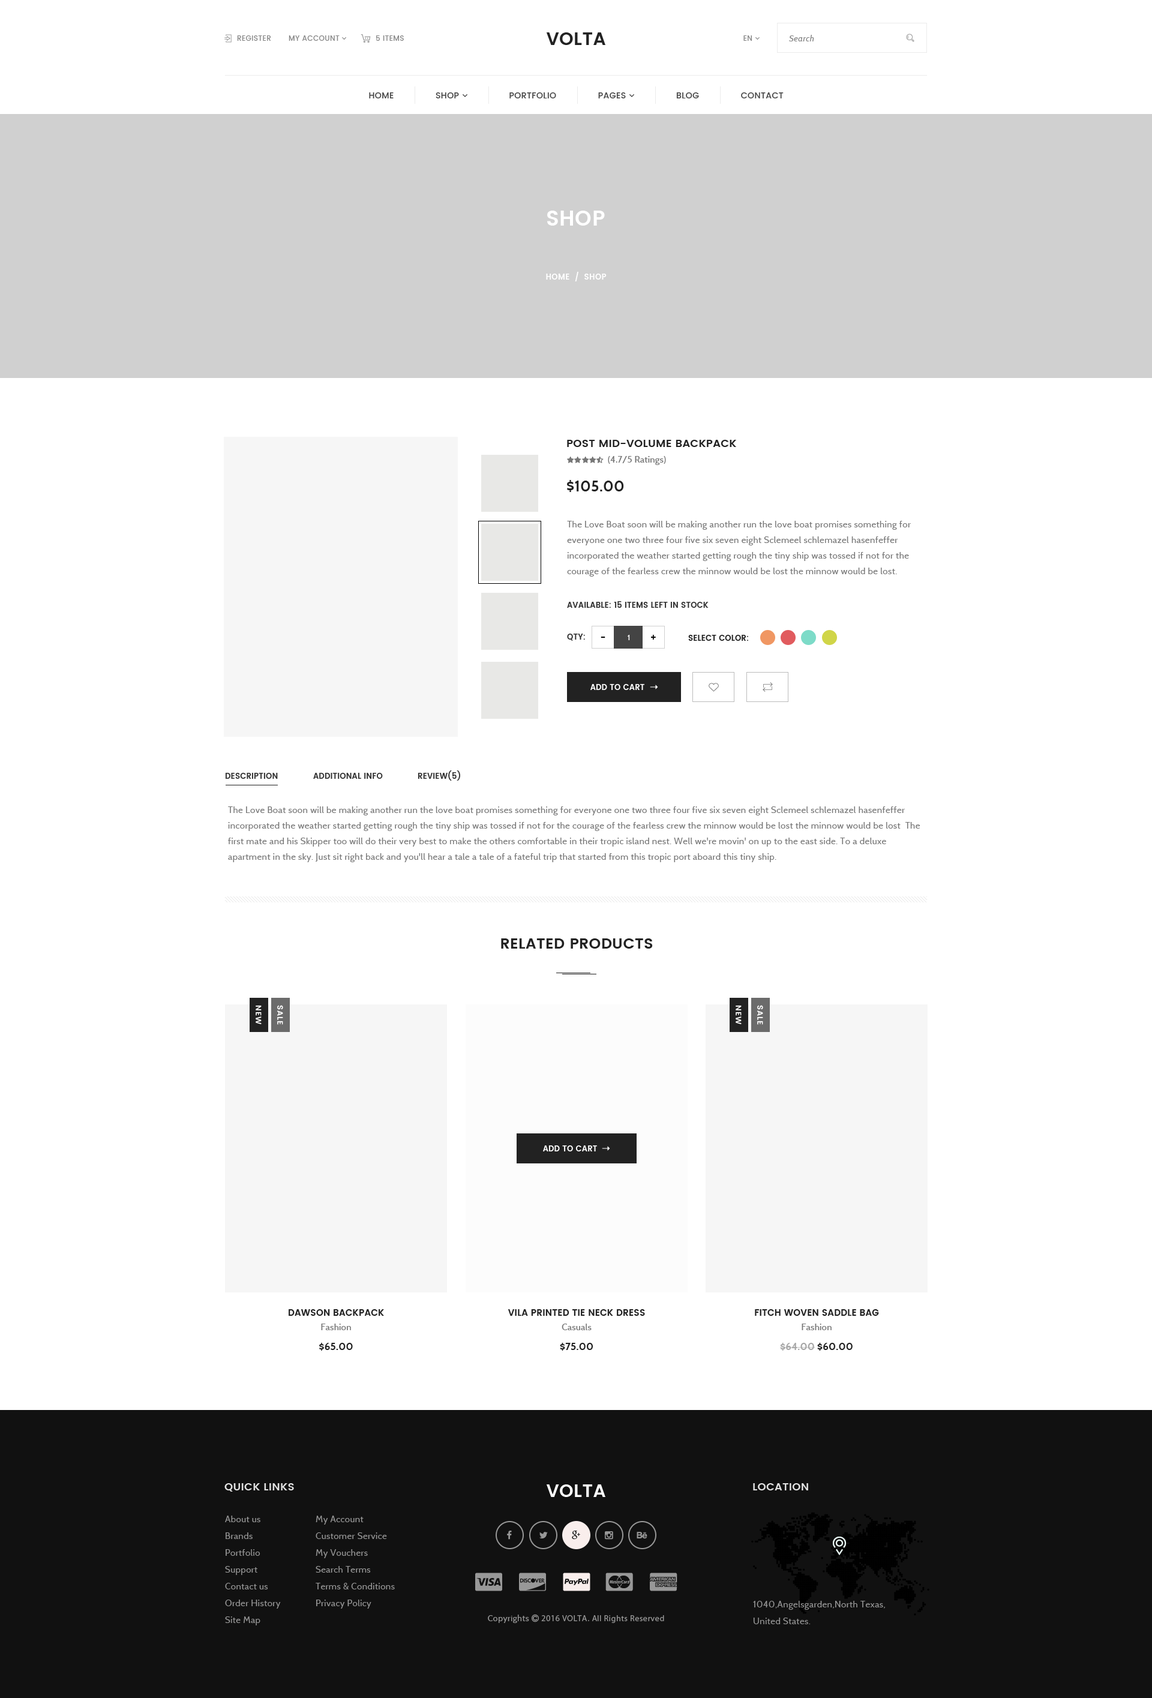
<style>
.page{position:relative;width:1152px;height:1698px;background:#ffffff}
.page>*{position:absolute;margin:0}
.t1{font:7.2px "Poppins-Medium";letter-spacing:0.03em;color:#888888}
.t2{font:18px "Poppins-SemiBold";letter-spacing:0.015em;color:#222222}
.t3{font:8.4px "Cabin-Italic";letter-spacing:0.04em;color:#888888}
.t4{font:21px "Poppins-SemiBold";letter-spacing:0.015em;color:#ffffff}
.t5{font:7.8px "Poppins-SemiBold";letter-spacing:0.03em;color:#ffffff}
.t6{font:10.8px "Poppins-SemiBold";letter-spacing:0.015em;color:#222222;text-transform:uppercase}
.t7{font:15px "Cabin-Bold";letter-spacing:0.015em;color:#222222}
.t8{font:9px/15.6px "Cabin-Regular";letter-spacing:0.03em;color:#777777}
.t9{font:7.8px "Poppins-SemiBold";letter-spacing:0.015em;color:#333333;text-transform:uppercase}
.t10{font:12px "Cabin-Regular";letter-spacing:0.015em;color:#000000}
.t11{font:7.8px "Cabin-Regular";letter-spacing:0.015em;color:#ffffff}
.t12{font:7.8px "Poppins-SemiBold";letter-spacing:0.015em;color:#222222}
.t13{font:7.8px "Poppins-SemiBold";letter-spacing:0.015em;color:#ffffff}
.t14{font:15px "Poppins-SemiBold";letter-spacing:0.015em;color:#222222;text-transform:uppercase}
.t15{font:7.8px "Poppins-SemiBold";letter-spacing:0.07em;color:#ffffff}
.t16{font:9px/14.4px "Poppins-SemiBold";letter-spacing:0.015em;color:#222222;text-transform:uppercase}
.t17{font:9px/14.4px "Cabin-Medium";letter-spacing:0.015em;color:#777777}
.t18{font:10.2px "Cabin-Bold";letter-spacing:0.015em;color:#222222}
.t19{font:10.2px "Cabin-Bold";letter-spacing:0.015em;color:#a7a7a7}
.t20{font:10.8px "Poppins-SemiBold";letter-spacing:0.015em;color:#e1e1e1}
.t21{font:18px "Poppins-SemiBold";letter-spacing:0.015em;color:#ffffff}
.t22{font:9px/16.8px "Cabin-Regular";letter-spacing:0.03em;color:#989898}
</style>
<div class="page">
<p class="t1" style="left:237px;top:35px;width:34px;height:6px">REGISTER</p>
<p class="t1" style="left:376px;top:35px;width:28px;height:6px">5 ITEMS</p>
<p class="t2" style="left:546px;top:32px;width:59px;height:13px">VOLTA</p>
<p class="t3" style="left:789px;top:35px;width:25px;height:6px">Search</p>
<p class="t4" style="left:547px;top:211px;width:58px;height:15px">SHOP</p>
<p class="t5" style="left:546px;top:272px;width:61px;height:9px">HOME  /  SHOP</p>
<p class="t6" style="left:567px;top:440px;width:169px;height:7px">Post Mid-Volume Backpack</p>
<p class="t7" style="left:567px;top:480px;width:57px;height:12px">$105.00</p>
<p class="t8" style="left:567px;top:521px;width:344px;height:56px">The Love Boat soon will be making another run the love boat promises something for everyone one two three four five six seven eight Sclemeel schlemazel hasenfeffer incorporated the weather started getting rough the tiny ship was tossed if not for the courage of the fearless crew the minnow would be lost the minnow would be lost.</p>
<p class="t9" style="left:567px;top:601px;width:142px;height:7px">Available: 15 items Left in Stock</p>
<p class="t9" style="left:567px;top:634px;width:18px;height:7px">Qty:</p>
<p class="t10" style="left:601px;top:637px;width:4px;height:1px">-</p>
<p class="t11" style="left:628px;top:635px;width:2px;height:5px">1</p>
<p class="t10" style="left:651px;top:635px;width:5px;height:5px">+</p>
<p class="t12" style="left:688px;top:635px;width:60px;height:6px">SELECT COLOR:</p>
<p class="t13" style="left:590px;top:684px;width:54px;height:6px">ADD TO CART</p>
<p class="t9" style="left:225px;top:773px;width:53px;height:6px">DESCRIPTION</p>
<p class="t9" style="left:313px;top:773px;width:70px;height:6px">ADDITIONAL INFO</p>
<p class="t9" style="left:418px;top:770px;width:42px;height:11px">REVIEW(5)</p>
<p class="t8" style="left:228px;top:806px;width:692px;height:56px">The Love Boat soon will be making another run the love boat promises something for everyone one two three four five six seven eight Sclemeel schlemazel hasenfeffer incorporated the weather started getting rough the tiny ship was tossed if not for the courage of the fearless crew the minnow would be lost the minnow would be lost  The first mate and his Skipper too will do their very best to make the others comfortable in their tropic island nest. Well we're movin' on up to the east side. To a deluxe apartment in the sky. Just sit right back and you'll hear a tale a tale of a fateful trip that started from this tropic port aboard this tiny ship.</p>
<p class="t14" style="left:501px;top:938px;width:152px;height:11px">RELATED PRODUCTS</p>
<p class="t15" style="left:256px;top:1005px;width:6px;height:19px;rotate:90deg">NEW</p>
<p class="t15" style="left:277px;top:1005px;width:6px;height:20px;rotate:90deg">SALE</p>
<p class="t15" style="left:736px;top:1005px;width:6px;height:19px;rotate:90deg">NEW</p>
<p class="t15" style="left:757px;top:1005px;width:6px;height:20px;rotate:90deg">SALE</p>
<p class="t13" style="left:543px;top:1145px;width:54px;height:6px">ADD TO CART</p>
<p class="t16" style="left:289px;top:1309px;width:95px;height:21px;text-align:center">Dawson Backpack<br><span class="t17">Fashion</span></p>
<p class="t16" style="left:508px;top:1309px;width:137px;height:21px;text-align:center">Vila Printed Tie Neck Dress<br><span class="t17">Casuals</span></p>
<p class="t16" style="left:755px;top:1309px;width:124px;height:21px;text-align:center">Fitch Woven Saddle Bag<br><span class="t17">Fashion</span></p>
<p class="t18" style="left:319px;top:1343px;width:34px;height:8px">$65.00</p>
<p class="t18" style="left:560px;top:1343px;width:33px;height:8px">$75.00</p>
<p class="t19" style="left:780px;top:1343px;width:73px;height:8px">$64.00<span class="t18"> $60.00</span></p>
<p class="t20" style="left:224px;top:1483px;width:70px;height:9px">QUICK LINKS</p>
<p class="t21" style="left:546px;top:1484px;width:59px;height:13px">VOLTA</p>
<p class="t20" style="left:753px;top:1483px;width:55px;height:7px">LOCATION</p>
<p class="t22" style="left:225px;top:1516px;width:56px;height:109px">About us<br>Brands<br>Portfolio<br>Support<br>Contact us<br>Order History<br>Site Map</p>
<p class="t22" style="left:316px;top:1516px;width:79px;height:93px">My Account<br>Customer Service<br>My Vouchers<br>Search Terms<br>Terms &amp; Conditions<br>Privacy Policy</p>
<p class="t22" style="left:753px;top:1601px;width:132px;height:23px">1040,Angelsgarden,North Texas,<br>United States.</p>
</div>
